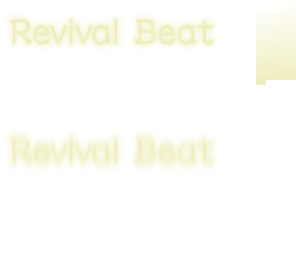
<style>
.page{position:relative;width:296px;height:256px;background:#ffffff}
.page>*{position:absolute;margin:0}
.t1{font:48.4px "DFLeiShoStd-W5";letter-spacing:-0.025em;color:#efeebe;scale:0.82 1}
.t2{font:48.4px "DFLeiShoStd-W5";color:#efeebe;scale:0.82 1}
</style>
<div class="page">
<p class="t1" style="left:10px;top:18px;width:204px;height:27px">Revival <span class="t2">Beat</span></p>
</div>
